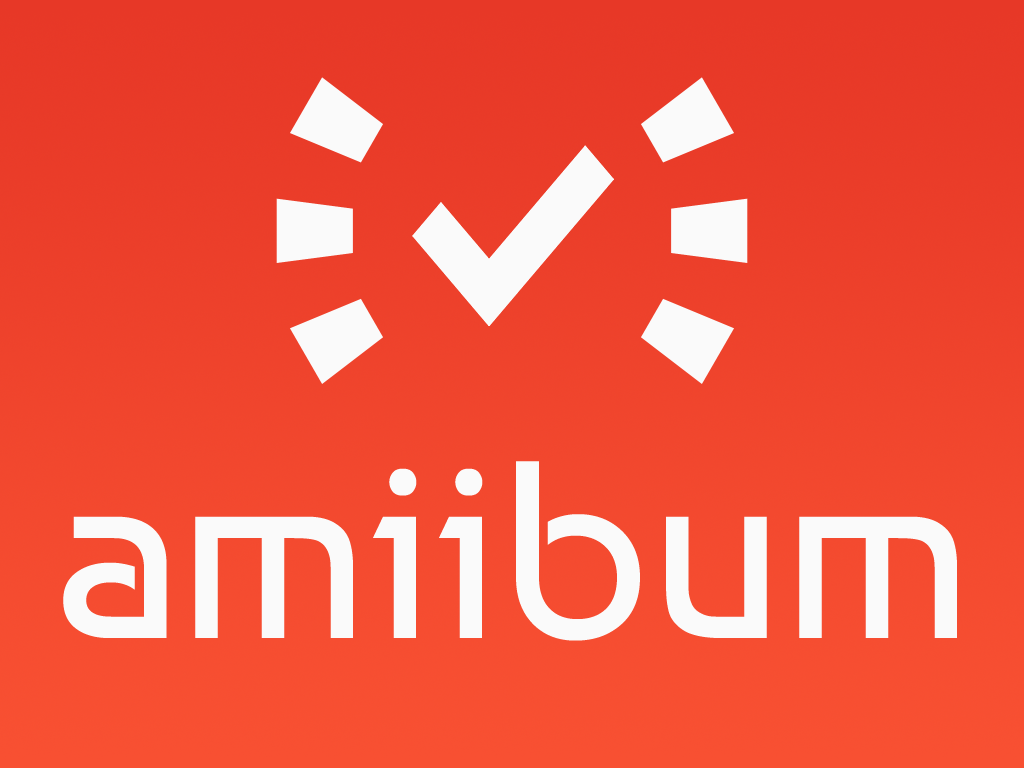
<style>
.page{position:relative;width:1024px;height:768px}
.page>*{position:absolute;margin:0}
.t1{font:252.5px "Baumans-Regular";color:#fafafa}
</style>
<div class="page">
<p class="t1" style="left:63px;top:461px;width:894px;height:180px">amiibum</p>
</div>
